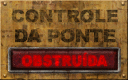
<style>
.page{position:relative;width:128px;height:80px}
.page>*{position:absolute;margin:0}
.t1{font:17.2px "Arial-Black";letter-spacing:-0.005em;color:#543e1d;font-weight:bold}
.t2{font:17.7px "Arial-Black";letter-spacing:-0.045em;color:#3f2c14;font-weight:bold;scale:1.04 1}
.t3{font:14.5px "Arial-Black";color:#c00000;scale:0.9 1}
</style>
<div class="page">
<p class="t1" style="left:11px;top:9px;width:107px;height:14px">CONTROLE</p>
<p class="t2" style="left:15px;top:29px;width:101px;height:14px">DA PONTE</p>
<p class="t3" style="left:22px;top:52px;width:86px;height:15px">OBSTRUÍDA</p>
<p class="t3" style="left:22px;top:52px;width:86px;height:15px">OBSTRUÍDA</p>
</div>
